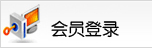
<style>
.page{position:relative;width:152px;height:48px}
.page>*{position:absolute;margin:0}
.t1{font:17px "FZY3JW--GB1-0";color:#000000}
</style>
<div class="page">
<p class="t1" style="left:51px;top:20px;width:68px;height:18px">会员登录</p>
</div>
